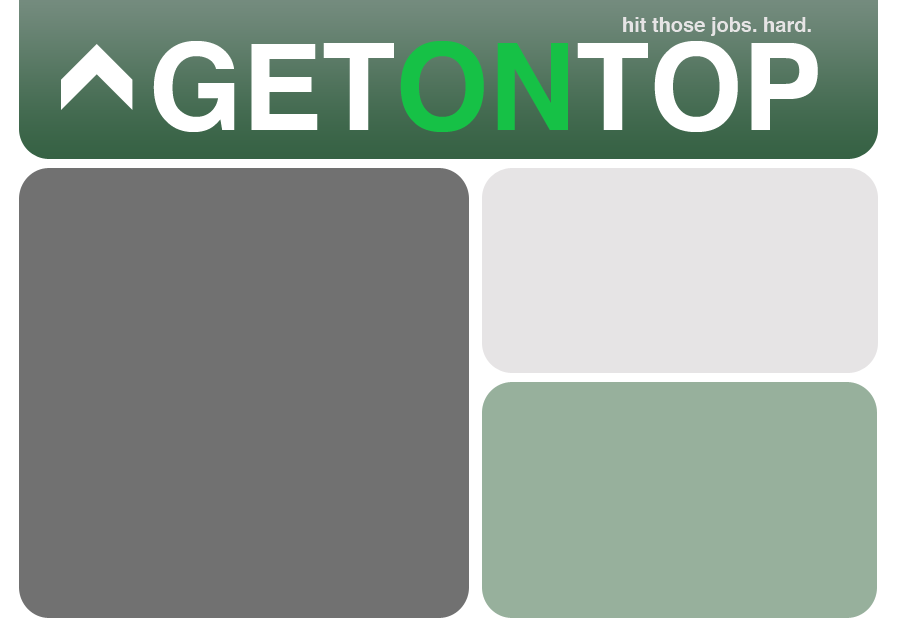
<style>
.page{position:relative;width:900px;height:640px;background:#717171}
.page>*{position:absolute;margin:0}
.t1{font:20px "Helvetica-Bold";color:#e6e4e5}
.t2{font:120px "Helvetica-Bold";color:#ffffff}
.t3{font:120px "Helvetica-Bold";color:#16c146}
</style>
<div class="page">
<p class="t1" style="left:623px;top:17px;width:188px;height:19px">hit those jobs. hard.</p>
<p class="t2" style="left:153px;top:41px;width:665px;height:91px">GET<span class="t3">ON</span>TOP</p>
</div>
